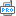
<style>
.page{position:relative;width:16px;height:16px;background:#ffffff}
.page>*{position:absolute;margin:0}
.t1{font:6.9px "Silkscreen";letter-spacing:-0.16em;color:#3399ff}
</style>
<div class="page">
<p class="t1" style="left:2px;top:8px;width:11px;height:4px">pro</p>
</div>
